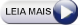
<style>
.page{position:relative;width:80px;height:25px}
.page>*{position:absolute;margin:0}
.t1{font:9.3px "Arial-BoldMT";color:#161616}
</style>
<div class="page">
<p class="t1" style="left:6px;top:8px;width:45px;height:7px">LEIA MAIS</p>
</div>
